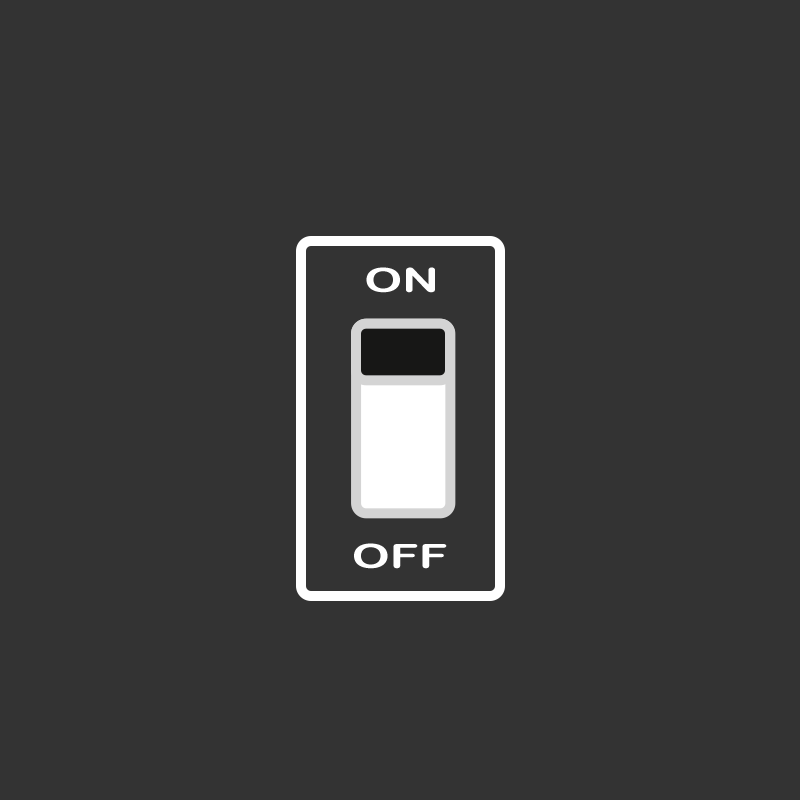
<style>
.page{position:relative;width:800px;height:800px;background:#333333}
.page>*{position:absolute;margin:0}
.t1{font:33.3px "ArialRoundedMTBold";color:#ffffff;scale:1.44 1}
</style>
<div class="page">
<p class="t1" style="left:366px;top:267px;width:69px;height:26px">ON</p>
<p class="t1" style="left:354px;top:543px;width:93px;height:26px">OFF</p>
</div>
